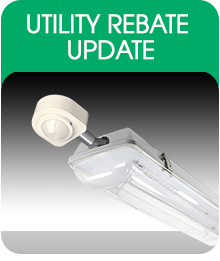
<style>
.page{position:relative;width:220px;height:261px;background:#00ab67}
.page>*{position:absolute;margin:0}
.t1{font:25.1px/26.1px "AvantGarde-Book";letter-spacing:-0.01em;color:#ffffff;text-transform:uppercase;font-weight:bold;scale:0.95 1}
</style>
<div class="page">
<p class="t1" style="left:27px;top:14px;width:161px;height:46px;text-align:center">Utility Rebate <br>Update</p>
</div>
